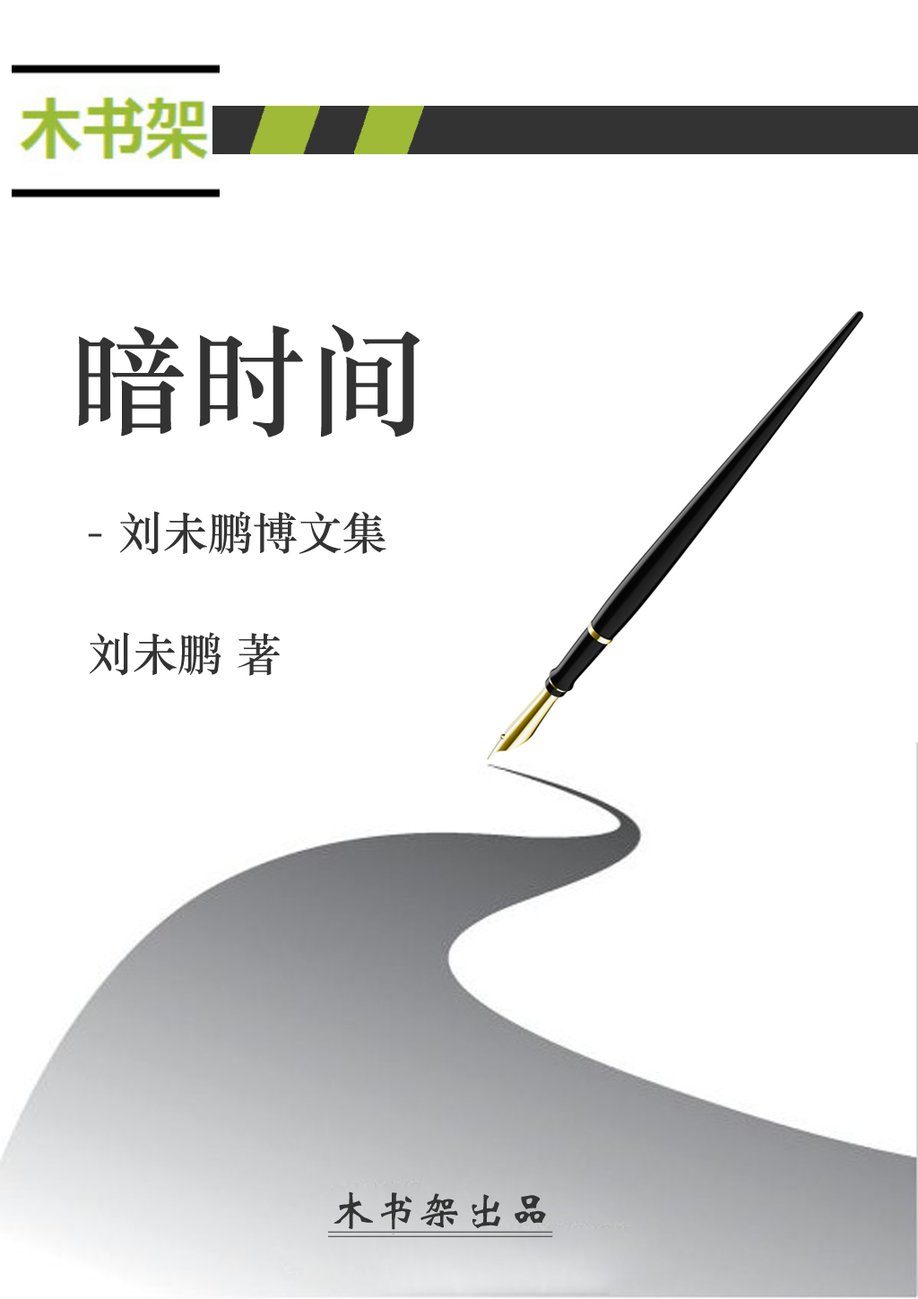
<style>
.page{position:relative;width:918px;height:1299px;background:#ffffff}
.page>*{position:absolute;margin:0}
.t1{font:119.5px "STZhongsong";color:#333333}
.t2{font:44.8px "STZhongsong";color:#333333}
.t3{font:44.8px "STXinwei";color:#333333;text-decoration:underline}
</style>
<div class="page">
<p class="t1" style="left:78px;top:325px;width:342px;height:112px">暗时间</p>
<p class="t2" style="left:88px;top:511px;width:298px;height:44px">- 刘未鹏博文集</p>
<p class="t2" style="left:90px;top:632px;width:191px;height:44px">刘未鹏 著</p>
<p class="t3" style="left:328px;top:1191px;width:225px;height:42px">木书架出品</p>
</div>
